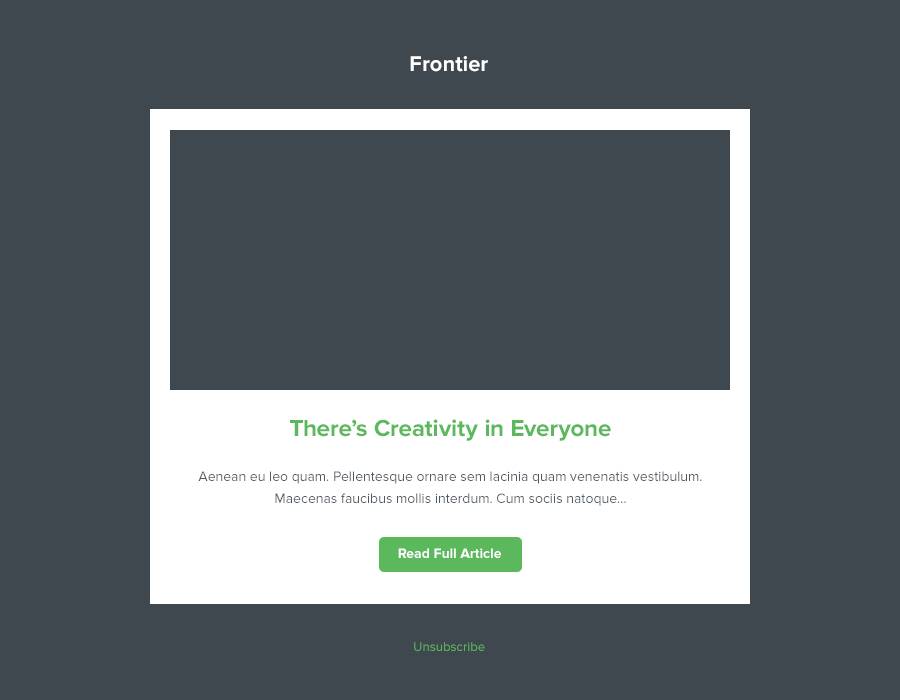
<style>
.page{position:relative;width:900px;height:700px;background:#40484f}
.page>*{position:absolute;margin:0}
.t1{font:22px "ProximaNova-Bold";color:#ffffff}
.t2{font:24px "ProximaNova-Bold";color:#5cb85c}
.t3{font:13.9px/21.9px "ProximaNova-Regular";color:#4f5962}
.t4{font:14px "ProximaNova-Bold";color:#ffffff}
.t5{font:13.1px "ProximaNova-Regular";color:#5cb85c}
</style>
<div class="page">
<p class="t1" style="left:410px;top:56px;width:78px;height:16px">Frontier</p>
<p class="t2" style="left:290px;top:419px;width:321px;height:22px">There’s Creativity in Everyone</p>
<p class="t3" style="left:198px;top:471px;width:504px;height:35px;text-align:center">Aenean eu leo quam. Pellentesque ornare sem lacinia quam venenatis vestibulum. <br>Maecenas faucibus mollis interdum. Cum sociis natoque...</p>
<p class="t4" style="left:398px;top:548px;width:103px;height:10px">Read Full Article</p>
<p class="t5" style="left:414px;top:642px;width:71px;height:9px">Unsubscribe</p>
</div>
